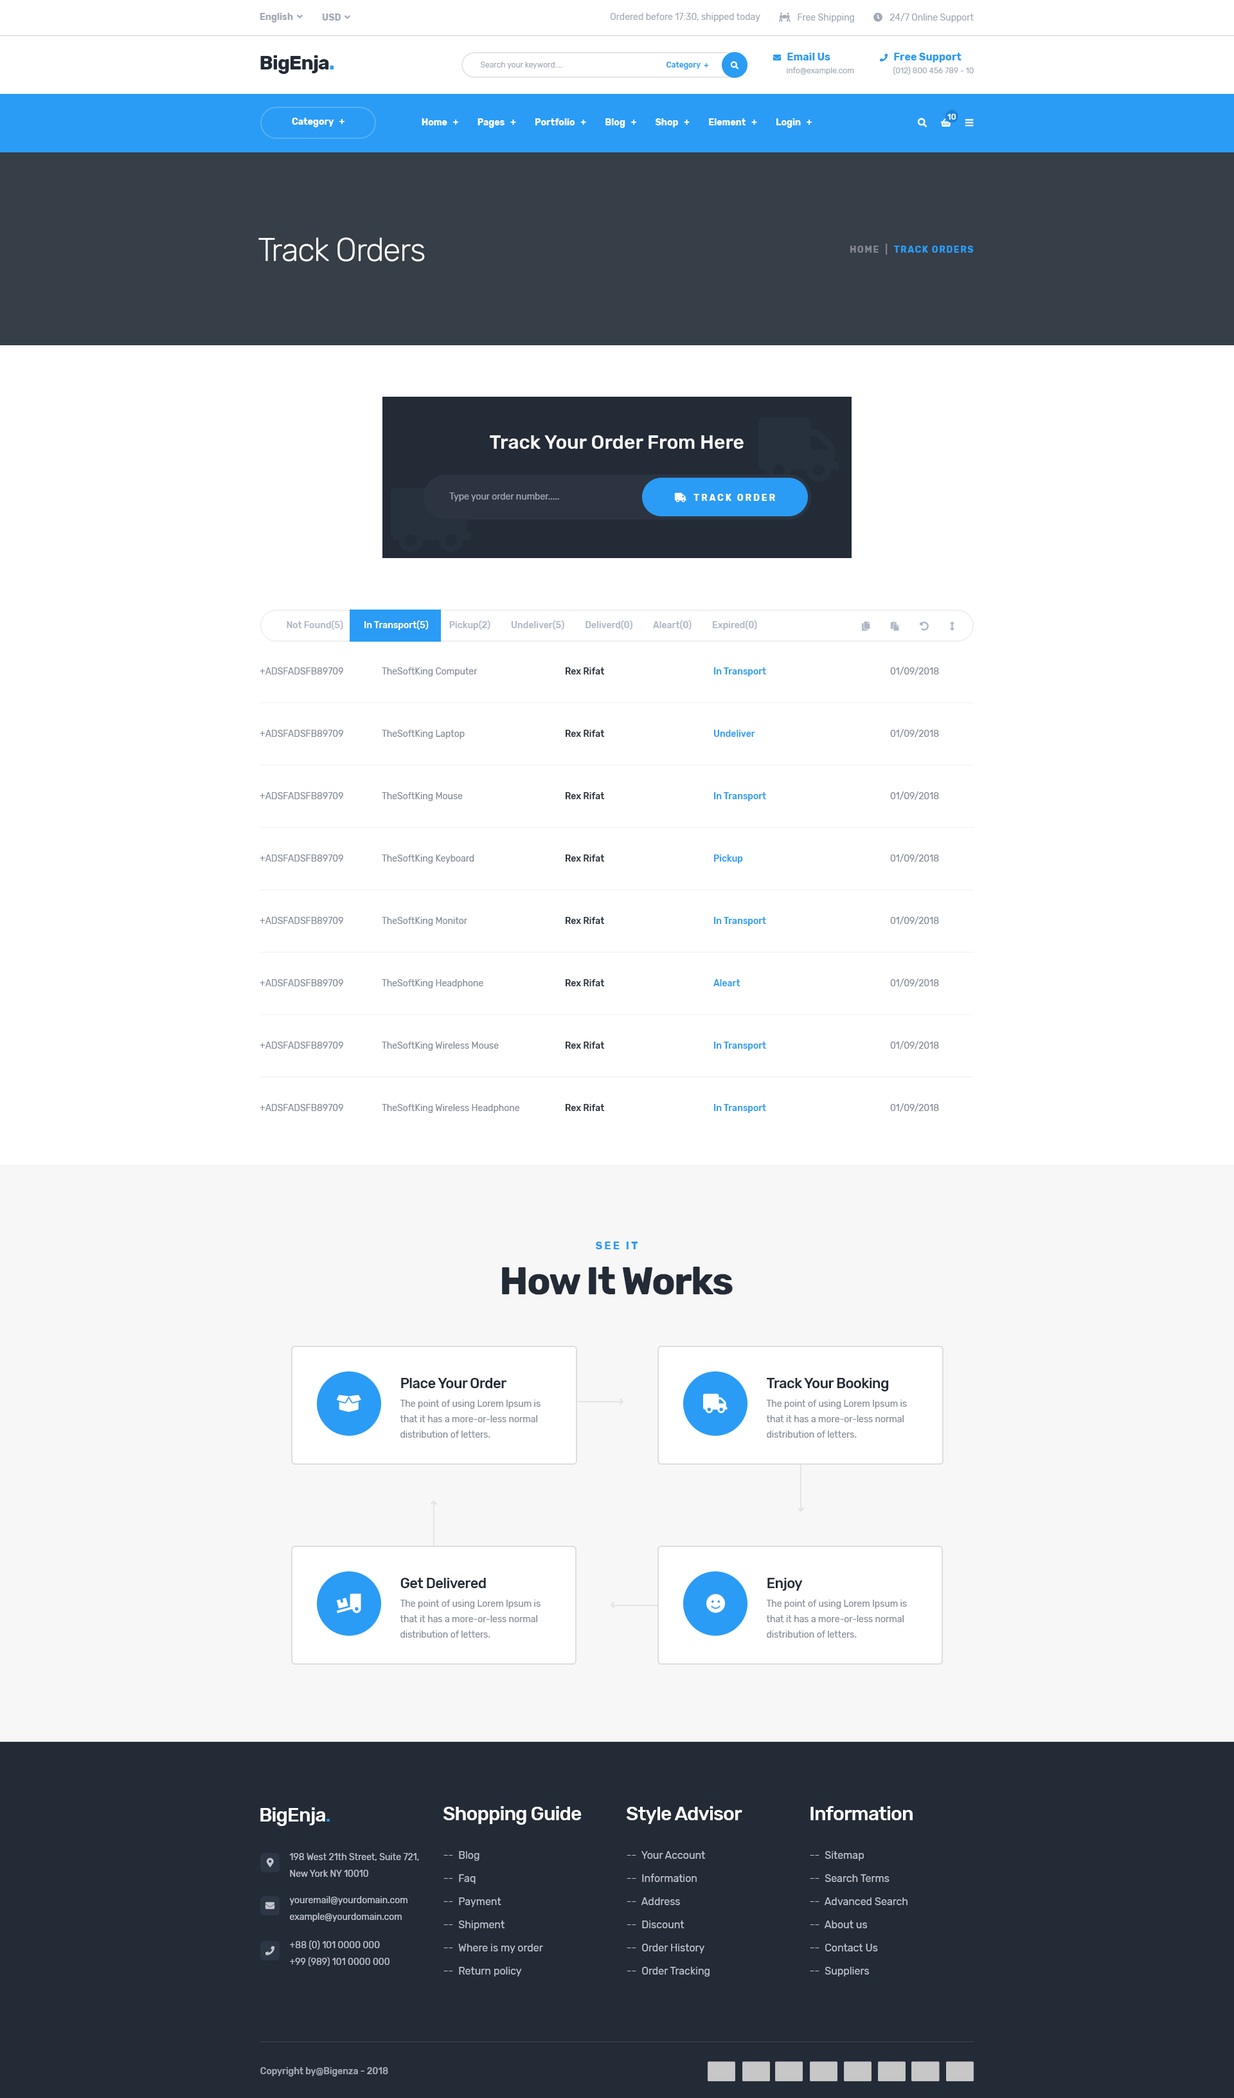
<style>
.page{position:relative;width:1234px;height:2098px;background:#ffffff}
.page>*{position:absolute;margin:0}
.t1{font:9px "Rubik-Regular";color:#a2aab6}
.t2{font:7.7px/12.9px "Rubik-Regular";color:#a2aab6}
.t3{font:7.7px/12.9px "FontAwesome5FreeSolid";color:#2a9cf5}
.t4{font:10.3px/12.9px "Rubik-Bold";color:#2a9cf5}
.t5{font:19.3px "Rubik-Bold";letter-spacing:-0.03em;color:#232b37}
.t6{font:19.3px "Rubik-Bold";letter-spacing:-0.03em;color:#2a9cf5}
.t7{font:7.7px "Rubik-Regular";color:#a2aab6}
.t8{font:7.7px "Rubik-Medium";color:#2a9cf5}
.t9{font:7.7px "Rubik-Medium";color:#ffffff}
.t10{font:9px "Rubik-Bold";color:#ffffff}
.t11{font:32.1px "Rubik-Light";letter-spacing:-0.03em;color:#ffffff}
.t12{font:9px "Rubik-Bold";letter-spacing:0.1em;color:#2a9cf5;text-transform:uppercase}
.t13{font:9px "Rubik-Bold";letter-spacing:0.1em;color:#848792;text-transform:uppercase}
.t14{font:19.3px "Rubik-Medium";color:#f7f7f7}
.t15{font:9px "Rubik-Regular";color:#a1a8b3}
.t16{font:9px "Rubik-Medium";color:#aeb7c4}
.t17{font:9px "Rubik-Medium";color:#ffffff}
.t18{font:9px "Rubik-Regular";color:#838b97}
.t19{font:9px "Rubik-Medium";color:#232b37}
.t20{font:9px "Rubik-Medium";color:#2a9cf5}
.t21{font:38.6px/45px "Rubik-Bold";letter-spacing:-0.03em;color:#232b37}
.t22{font:10.3px/45px "Rubik-Bold";letter-spacing:0.2em;color:#2a9cf5;text-transform:uppercase}
.t23{font:14.1px "Rubik-Medium";letter-spacing:-0.03em;color:#232b37}
.t24{font:9px/15.4px "Rubik-Regular";color:#838b97}
.t25{font:19.3px "Rubik-Medium";letter-spacing:-0.03em;color:#ffffff}
.t26{font:19.3px "Rubik-Medium";letter-spacing:-0.03em;color:#2a9cf5}
.t27{font:9px/16.7px "Rubik-Regular";color:#c1c6ce}
.t28{font:10.3px/23.1px "Rubik-Regular";color:#c1c6ce}
.t29{font:9px "Rubik-Medium";color:#a4abb6}
</style>
<div class="page">
<p class="t1" style="left:611px;top:13px;width:149px;height:9px">Ordered before 17:30, shipped today</p>
<p class="t2" style="left:879px;top:53px;width:95px;height:22px"><span class="t3">phone  </span><span class="t4">Free Support<br>      </span> (012) 800 456 789 - 10</p>
<p class="t5" style="left:260px;top:55px;width:74px;height:19px">BigEnja<span class="t6">.</span></p>
<p class="t7" style="left:480px;top:62px;width:82px;height:7px">Search your keyword....</p>
<p class="t8" style="left:667px;top:62px;width:42px;height:8px">Category  +</p>
<p class="t9" style="left:948px;top:114px;width:9px;height:6px">10</p>
<p class="t10" style="left:292px;top:118px;width:53px;height:9px">Category   +</p>
<p class="t10" style="left:422px;top:118px;width:390px;height:10px">Home   +          Pages   +          Portfolio   +          Blog   +          Shop   +          Element   +          Login   +</p>
<p class="t11" style="left:258px;top:237px;width:167px;height:25px">Track Orders</p>
<p class="t12" style="left:851px;top:244px;width:123px;height:11px"><span class="t13">home  |  </span>track orders</p>
<p class="t14" style="left:490px;top:435px;width:254px;height:14px">Track Your Order From Here</p>
<p class="t15" style="left:449px;top:492px;width:110px;height:9px">Type your order number.....</p>
<p class="t16" style="left:287px;top:620px;width:470px;height:10px">Not Found(5)          <span class="t17">In Transport(5)</span>          Pickup(2)          Undeliver(5)          Deliverd(0)          Aleart(0)          Expired(0)</p>
<p class="t18" style="left:260px;top:667px;width:83px;height:7px">+ADSFADSFB89709</p>
<p class="t18" style="left:382px;top:667px;width:96px;height:9px">TheSoftKing Computer</p>
<p class="t19" style="left:566px;top:667px;width:39px;height:7px">Rex Rifat</p>
<p class="t20" style="left:714px;top:667px;width:52px;height:9px">In Transport</p>
<p class="t18" style="left:890px;top:667px;width:49px;height:8px">01/09/2018</p>
<p class="t18" style="left:260px;top:730px;width:83px;height:7px">+ADSFADSFB89709</p>
<p class="t18" style="left:382px;top:730px;width:83px;height:9px">TheSoftKing Laptop</p>
<p class="t19" style="left:566px;top:730px;width:39px;height:7px">Rex Rifat</p>
<p class="t20" style="left:714px;top:730px;width:41px;height:7px">Undeliver</p>
<p class="t18" style="left:890px;top:729px;width:49px;height:8px">01/09/2018</p>
<p class="t18" style="left:260px;top:792px;width:83px;height:7px">+ADSFADSFB89709</p>
<p class="t18" style="left:382px;top:792px;width:81px;height:9px">TheSoftKing Mouse</p>
<p class="t19" style="left:566px;top:792px;width:39px;height:7px">Rex Rifat</p>
<p class="t20" style="left:714px;top:792px;width:52px;height:9px">In Transport</p>
<p class="t18" style="left:890px;top:791px;width:49px;height:9px">01/09/2018</p>
<p class="t18" style="left:260px;top:854px;width:83px;height:7px">+ADSFADSFB89709</p>
<p class="t18" style="left:382px;top:854px;width:92px;height:9px">TheSoftKing Keyboard</p>
<p class="t19" style="left:566px;top:854px;width:39px;height:7px">Rex Rifat</p>
<p class="t20" style="left:714px;top:854px;width:29px;height:9px">Pickup</p>
<p class="t18" style="left:890px;top:854px;width:49px;height:8px">01/09/2018</p>
<p class="t18" style="left:260px;top:917px;width:83px;height:7px">+ADSFADSFB89709</p>
<p class="t18" style="left:382px;top:917px;width:85px;height:9px">TheSoftKing Monitor</p>
<p class="t19" style="left:566px;top:917px;width:39px;height:7px">Rex Rifat</p>
<p class="t20" style="left:714px;top:917px;width:52px;height:9px">In Transport</p>
<p class="t18" style="left:890px;top:916px;width:49px;height:8px">01/09/2018</p>
<p class="t18" style="left:260px;top:979px;width:83px;height:7px">+ADSFADSFB89709</p>
<p class="t18" style="left:382px;top:979px;width:101px;height:9px">TheSoftKing Headphone</p>
<p class="t19" style="left:566px;top:979px;width:39px;height:7px">Rex Rifat</p>
<p class="t20" style="left:714px;top:979px;width:27px;height:7px">Aleart</p>
<p class="t18" style="left:890px;top:978px;width:49px;height:9px">01/09/2018</p>
<p class="t18" style="left:260px;top:1041px;width:83px;height:7px">+ADSFADSFB89709</p>
<p class="t18" style="left:382px;top:1041px;width:117px;height:9px">TheSoftKing Wireless Mouse</p>
<p class="t19" style="left:566px;top:1041px;width:39px;height:7px">Rex Rifat</p>
<p class="t20" style="left:714px;top:1041px;width:52px;height:9px">In Transport</p>
<p class="t18" style="left:890px;top:1041px;width:49px;height:8px">01/09/2018</p>
<p class="t18" style="left:260px;top:1104px;width:83px;height:7px">+ADSFADSFB89709</p>
<p class="t18" style="left:382px;top:1104px;width:137px;height:9px">TheSoftKing Wireless Headphone</p>
<p class="t19" style="left:566px;top:1104px;width:39px;height:7px">Rex Rifat</p>
<p class="t20" style="left:714px;top:1104px;width:52px;height:9px">In Transport</p>
<p class="t18" style="left:890px;top:1103px;width:49px;height:9px">01/09/2018</p>
<p class="t21" style="left:502px;top:1241px;width:231px;height:54px;text-align:center"><span class="t22">See it<br></span>How It Works</p>
<p class="t23" style="left:401px;top:1378px;width:106px;height:10px">Place Your Order</p>
<p class="t23" style="left:767px;top:1378px;width:122px;height:13px">Track Your Booking</p>
<p class="t24" style="left:400px;top:1400px;width:141px;height:37px">The point of using Lorem Ipsum is that it has a more-or-less normal distribution of letters.</p>
<p class="t24" style="left:766px;top:1400px;width:141px;height:37px">The point of using Lorem Ipsum is that it has a more-or-less normal distribution of letters.</p>
<p class="t23" style="left:401px;top:1578px;width:85px;height:10px">Get Delivered</p>
<p class="t23" style="left:768px;top:1578px;width:35px;height:12px">Enjoy</p>
<p class="t24" style="left:400px;top:1599px;width:141px;height:38px">The point of using Lorem Ipsum is that it has a more-or-less normal distribution of letters.</p>
<p class="t24" style="left:766px;top:1599px;width:141px;height:38px">The point of using Lorem Ipsum is that it has a more-or-less normal distribution of letters.</p>
<p class="t25" style="left:444px;top:1806px;width:138px;height:18px">Shopping Guide</p>
<p class="t25" style="left:627px;top:1806px;width:115px;height:18px">Style Advisor</p>
<p class="t25" style="left:811px;top:1806px;width:102px;height:14px">Information</p>
<p class="t25" style="left:260px;top:1807px;width:70px;height:19px">BigEnja<span class="t26">.</span></p>
<p class="t27" style="left:289px;top:1853px;width:130px;height:24px">198 West 21th Street, Suite 721,<br>New York NY 10010</p>
<p class="t28" style="left:444px;top:1851px;width:99px;height:125px">--  Blog<br>--  Faq<br>--  Payment<br>--  Shipment<br>--  Where is my order<br>--  Return policy</p>
<p class="t28" style="left:627px;top:1851px;width:83px;height:125px">--  Your Account<br>--  Information<br>--  Address<br>--  Discount<br>--  Order History<br>--  Order Tracking</p>
<p class="t28" style="left:810px;top:1851px;width:98px;height:125px">--  Sitemap<br>--  Search Terms<br>--  Advanced Search<br>--  About us<br>--  Contact Us<br>--  Suppliers</p>
<p class="t27" style="left:289px;top:1896px;width:119px;height:26px">youremail@yourdomain.com<br>example@yourdomain.com</p>
<p class="t27" style="left:290px;top:1940px;width:100px;height:26px">+88 (0) 101 0000 000<br>+99 (989) 101 0000 000</p>
<p class="t29" style="left:260px;top:2067px;width:128px;height:9px">Copyright by@Bigenza - 2018</p>
</div>
